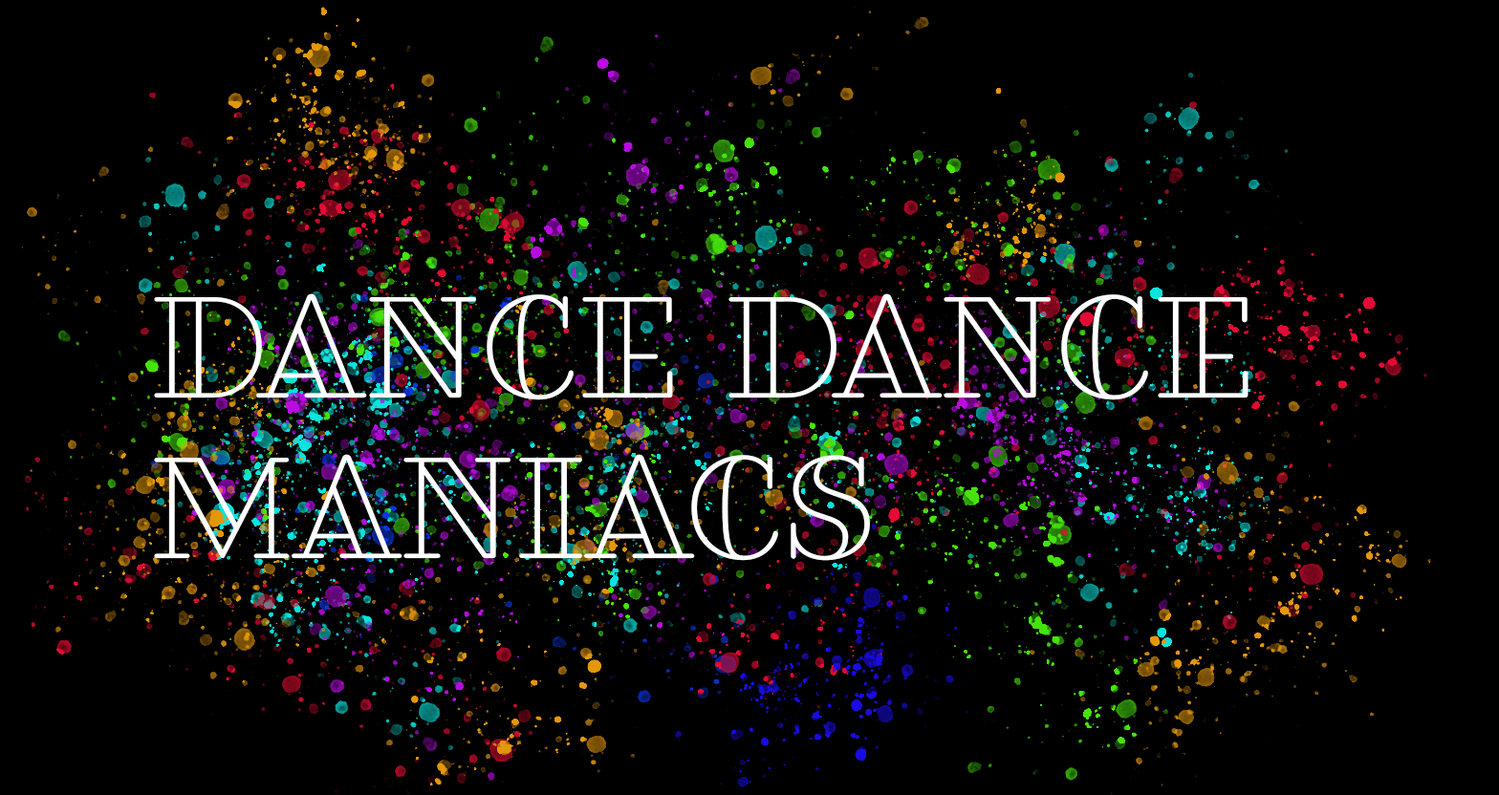
<style>
.page{position:relative;width:1499px;height:795px;background:#000000}
.page>*{position:absolute;margin:0}
.t1{font:133.8px "FairwaterOpenSerif-Regular";color:#ffffff}
</style>
<div class="page">
<p class="t1" style="left:154px;top:294px;width:1095px;height:267px">Dance Dance<br>Maniacs</p>
</div>
